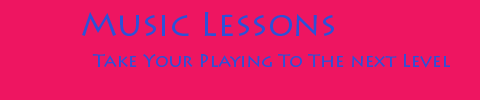
<style>
.page{position:relative;width:480px;height:100px;background:#ee1561}
.page>*{position:absolute;margin:0}
.t1{font:33.6px "LithosPro-Regular";color:#2d51d7}
.t2{font:18px "LithosPro-Regular";color:#2d51d7}
</style>
<div class="page">
<p class="t1" style="left:82px;top:12px;width:252px;height:24px">Music Lessons</p>
<p class="t2" style="left:92px;top:54px;width:358px;height:14px">Take Your Playing To The next Level</p>
</div>
